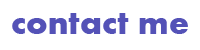
<style>
.page{position:relative;width:200px;height:50px;background:#ffffff}
.page>*{position:absolute;margin:0}
.t1{font:35px "Aharoni-Bold";color:#5452b7}
</style>
<div class="page">
<p class="t1" style="left:12px;top:13px;width:176px;height:21px">contact me</p>
</div>
